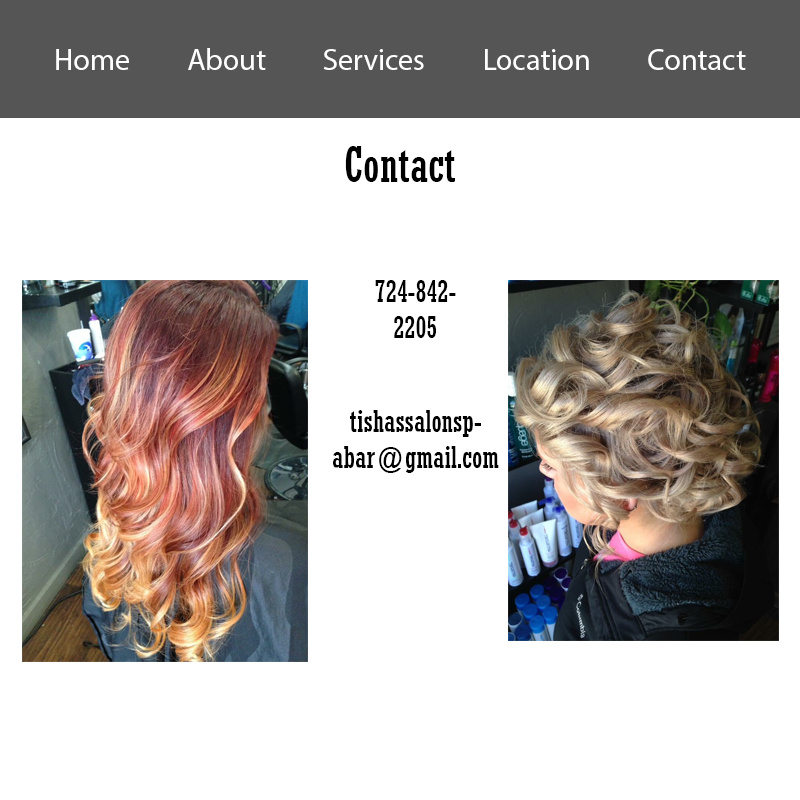
<style>
.page{position:relative;width:800px;height:800px;background:#ffffff}
.page>*{position:absolute;margin:0}
.t1{font:30px "MyriadPro-Regular";color:#ffffff}
.t2{font:48px "Rockwell-Condensed";color:#000000}
.t3{font:30px "Rockwell-Condensed";color:#000000}
</style>
<div class="page">
<p class="t1" style="left:56px;top:48px;width:690px;height:22px">Home         About         Services         Location         Contact</p>
<p class="t2" style="left:345px;top:146px;width:110px;height:36px">Contact</p>
<p class="t3" style="left:333px;top:280px;width:166px;height:193px;text-align:center">724-842-<br>2205<br><br>tishassalonspabar@gmail.com</p>
</div>
